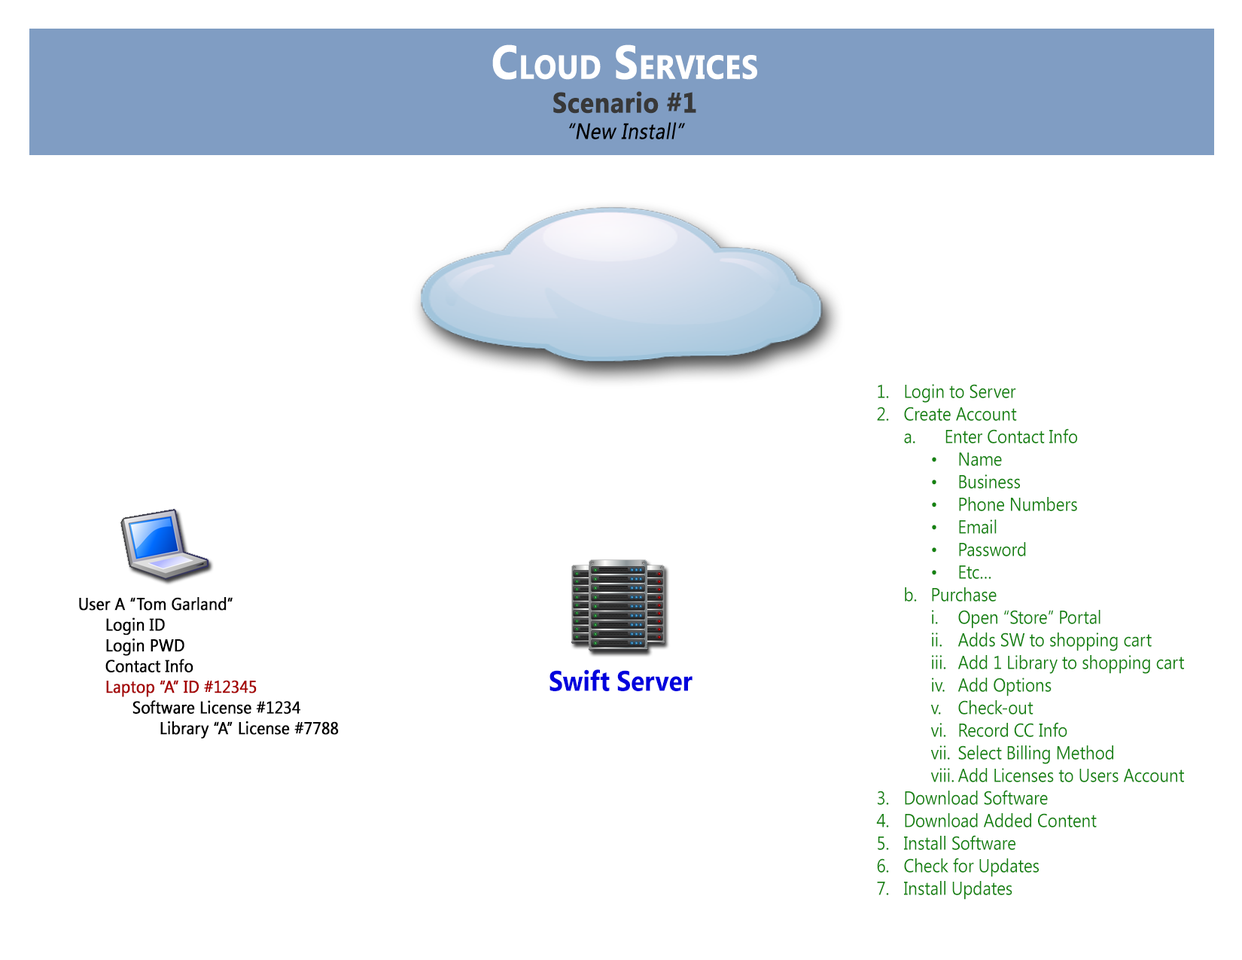
<style>
.page{position:relative;width:1242px;height:960px;background:#ffffff}
.page>*{position:absolute;margin:0}
.t1{font:47.1px "SegoeUI-Bold";letter-spacing:-0.005em;color:#ffffff;font-variant:small-caps;font-weight:bold;scale:0.9 1}
.t2{font:28.2px "SegoeUI-Bold";letter-spacing:-0.005em;color:#383838;font-weight:bold;scale:0.9 1}
.t3{font:22px "SegoeUI";letter-spacing:-0.005em;color:#000000;font-weight:bold;font-style:italic;scale:0.9 1}
.t4{font:18.8px "SegoeUI";letter-spacing:-0.005em;color:#14820f;scale:0.9 1}
.t5{font:17.3px "SegoeUI";letter-spacing:-0.005em;color:#000000;font-weight:bold;scale:0.9 1}
.t6{font:17.3px "SegoeUI";letter-spacing:-0.005em;color:#a50000;font-weight:bold;scale:0.9 1}
.t7{font:28.2px "SegoeUI-Bold";letter-spacing:-0.005em;color:#0000dd;scale:0.9 1}
</style>
<div class="page">
<p class="t1" style="left:492px;top:44px;width:265px;height:95px;text-align:center">Cloud Services<br><span class="t2">Scenario #1<br></span><span class="t3">“New Install”</span></p>
<p class="t4" style="left:876px;top:384px;width:308px;height:516px">1. Login to Server<br>2. Create Account<br> a.    Enter Contact Info<br>        • Name<br>        • Business<br>        • Phone Numbers<br>        • Email<br>        • Password<br>        • Etc…<br> b. Purchase <br>  i. Open “Store” Portal<br>  ii. Adds SW to shopping cart<br>  iii. Add 1 Library to shopping cart<br>  iv. Add Options<br>  v. Check-out<br>  vi. Record CC Info<br>  vii. Select Billing Method<br>  viii. Add Licenses to Users Account<br>3. Download Software<br>4. Download Added Content<br>5. Install Software<br>6. Check for Updates<br>7. Install Updates</p>
<p class="t5" style="left:79px;top:597px;width:260px;height:142px">User A “Tom Garland”<br> Login ID<br> Login PWD<br> Contact Info<br><span class="t6"> Laptop “A” ID #12345<br></span>  Software License #1234<br>   Library “A” License #7788</p>
<p class="t7" style="left:550px;top:669px;width:143px;height:22px">Swift Server</p>
</div>
